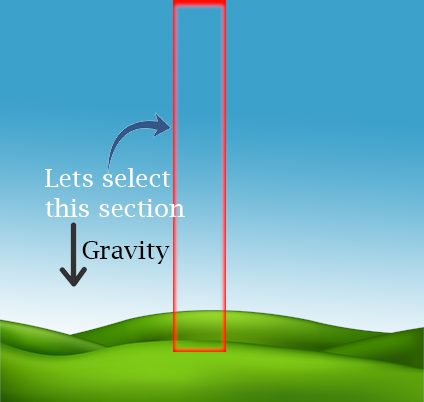
<style>
.page{position:relative;width:424px;height:402px}
.page>*{position:absolute;margin:0}
.t1{font:25px "LucidaBright";color:#ffffff}
.t2{font:25px "LucidaBright";color:#000000}
</style>
<div class="page">
<p class="t1" style="left:45px;top:168px;width:140px;height:49px">Lets select<br>this section</p>
<p class="t2" style="left:82px;top:241px;width:88px;height:23px">Gravity</p>
</div>
